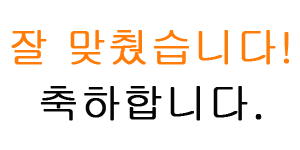
<style>
.page{position:relative;width:300px;height:150px;background:#ffffff}
.page>*{position:absolute;margin:0}
.t1{font:41.7px "Gulim";color:#ff7c08;font-weight:bold}
.t2{font:41.7px "Gulim";color:#050506;font-weight:bold}
</style>
<div class="page">
<p class="t1" style="left:11px;top:30px;width:278px;height:35px">잘 맞췄습니다!</p>
<p class="t2" style="left:40px;top:86px;width:222px;height:35px">축하합니다.</p>
</div>
